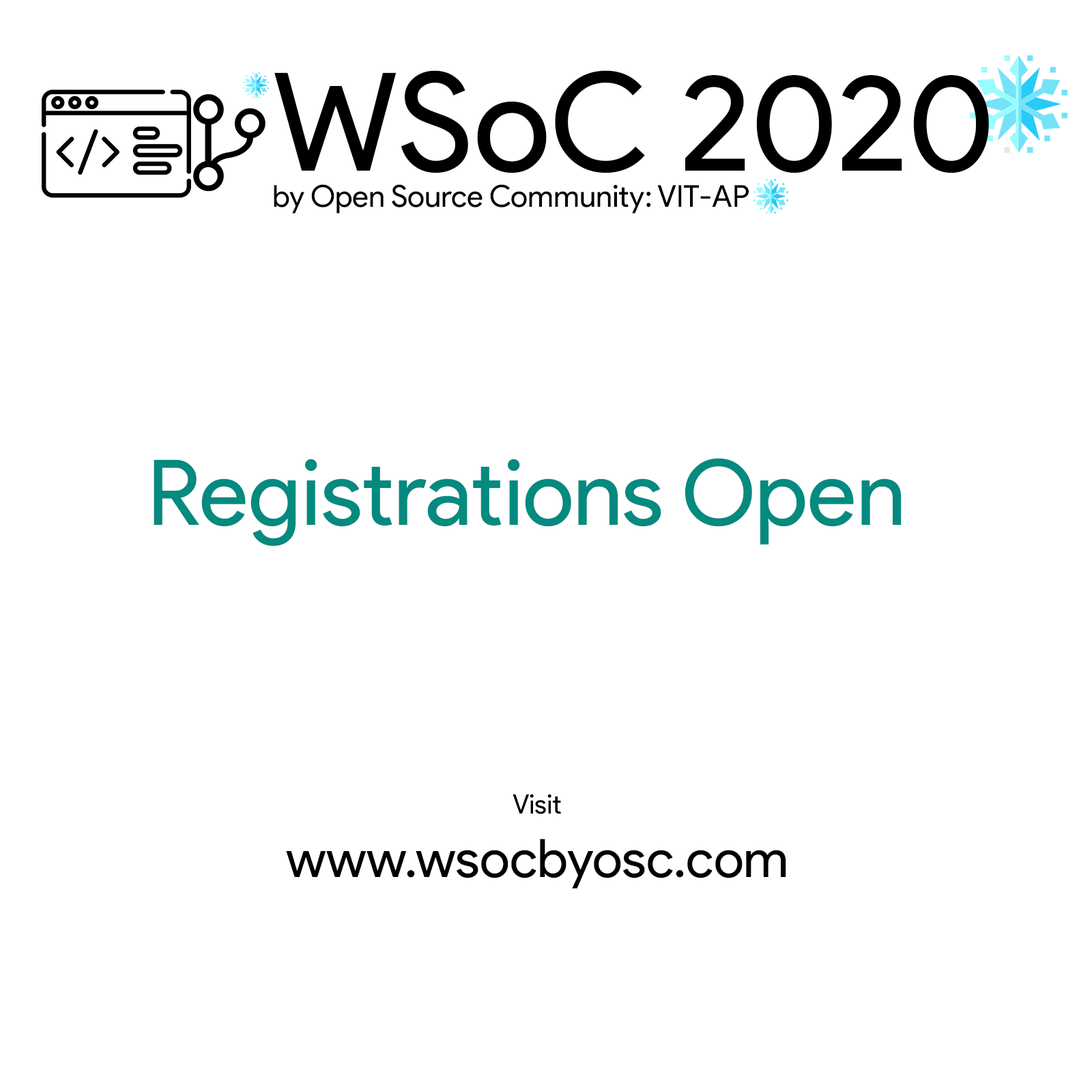
<style>
.page{position:relative;width:1092px;height:1092px;background:#ffffff}
.page>*{position:absolute;margin:0}
.t1{font:30.4px "ProductSans-Regular";color:#000000}
.t2{font:136.5px "ProductSans-Regular";color:#000000}
.t3{font:91px "ProductSans-Regular";color:#048a7f}
.t4{font:53.1px "ProductSans-Regular";color:#000000}
.t5{font:26.6px "ProductSans-Regular";color:#000000}
</style>
<div class="page">
<p class="t1" style="left:274px;top:70px;width:715px;height:144px"><span class="t2">WSoC 2020<br></span>by Open Source Community: VIT-AP</p>
<p class="t3" style="left:154px;top:458px;width:748px;height:88px">Registrations Open</p>
<p class="t4" style="left:286px;top:794px;width:500px;height:95px;text-align:center"><span class="t5">Visit<br></span>www.wsocbyosc.com</p>
</div>
